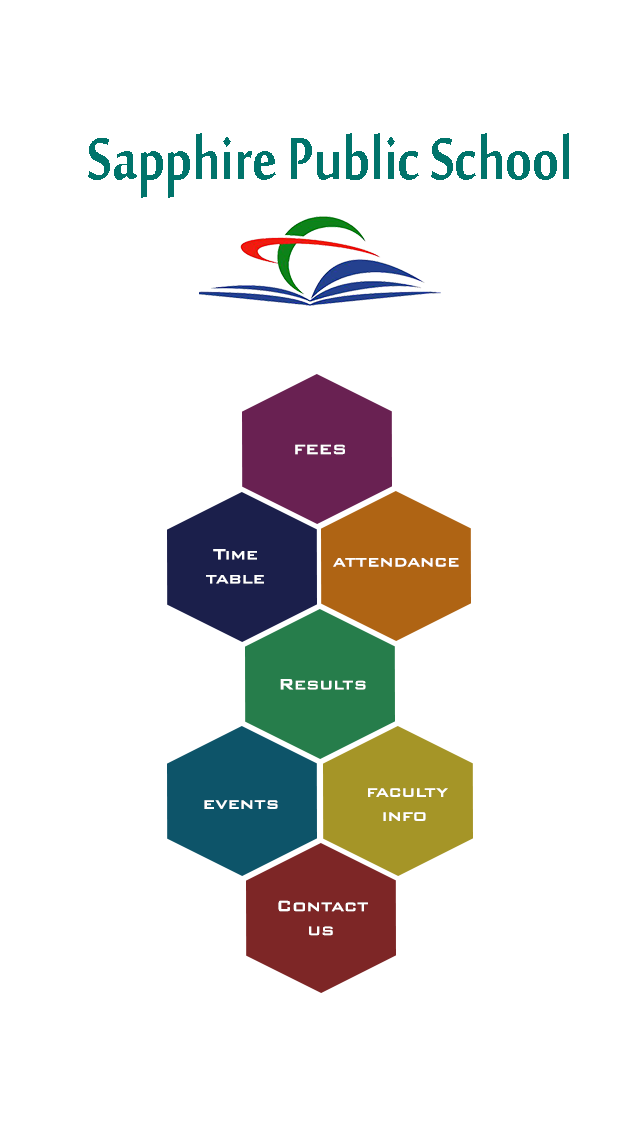
<style>
.page{position:relative;width:640px;height:1136px;background:#ffffff}
.page>*{position:absolute;margin:0}
.t1{font:90px "MoolBoran";color:#00746b;scale:0.84 1}
.t2{font:22px "BankGothicBT-Medium";color:#ffffff}
.t3{font:20px "BankGothicBT-Medium";color:#ffffff}
</style>
<div class="page">
<p class="t1" style="left:88px;top:133px;width:481px;height:65px">Sapphire Public School</p>
<p class="t2" style="left:295px;top:444px;width:50px;height:11px">fees</p>
<p class="t3" style="left:206px;top:549px;width:58px;height:35px">Time<br>table</p>
<p class="t3" style="left:333px;top:558px;width:126px;height:9px">attendance</p>
<p class="t3" style="left:280px;top:679px;width:86px;height:11px">Results</p>
<p class="t3" style="left:368px;top:788px;width:80px;height:33px">faculty<br>  info</p>
<p class="t3" style="left:204px;top:800px;width:74px;height:9px">events</p>
<p class="t3" style="left:278px;top:900px;width:90px;height:36px">Contact<br>    us</p>
</div>
